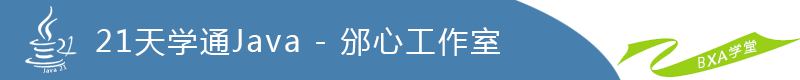
<style>
.page{position:relative;width:800px;height:80px;background:#4780ae}
.page>*{position:absolute;margin:0}
.t1{font:30px "MicrosoftYaHei";letter-spacing:0.08em;color:#ffffff}
.t2{font:5.7px "MicrosoftYaHei";letter-spacing:0.08em}
</style>
<div class="page">
<p class="t1" style="left:96px;top:27px;width:404px;height:29px">21天学通Java - 邠心工作室</p>
<p class="t2" style="left:42px;top:64px;width:25px;height:9px;rotate:-10deg">Java 21</p>
</div>
